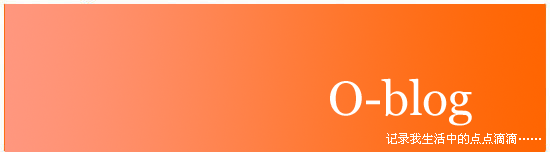
<style>
.page{position:relative;width:550px;height:155px}
.page>*{position:absolute;margin:0}
.t1{font:48px "Georgia";color:#ffffff}
.t2{font:12px "SimSun";color:#ffffff}
</style>
<div class="page">
<p class="t1" style="left:330px;top:78px;width:142px;height:48px">O-blog</p>
<p class="t2" style="left:386px;top:133px;width:155px;height:11px">记录我生活中的点点滴滴……</p>
</div>
